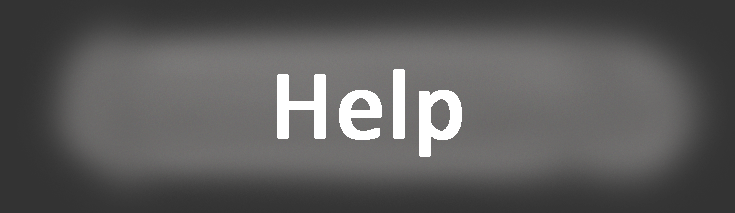
<style>
.page{position:relative;width:735px;height:213px}
.page>*{position:absolute;margin:0}
.t1{font:100px "Calibri";color:#ffffff;font-weight:bold}
</style>
<div class="page">
<p class="t1" style="left:277px;top:69px;width:185px;height:88px">Help</p>
</div>
